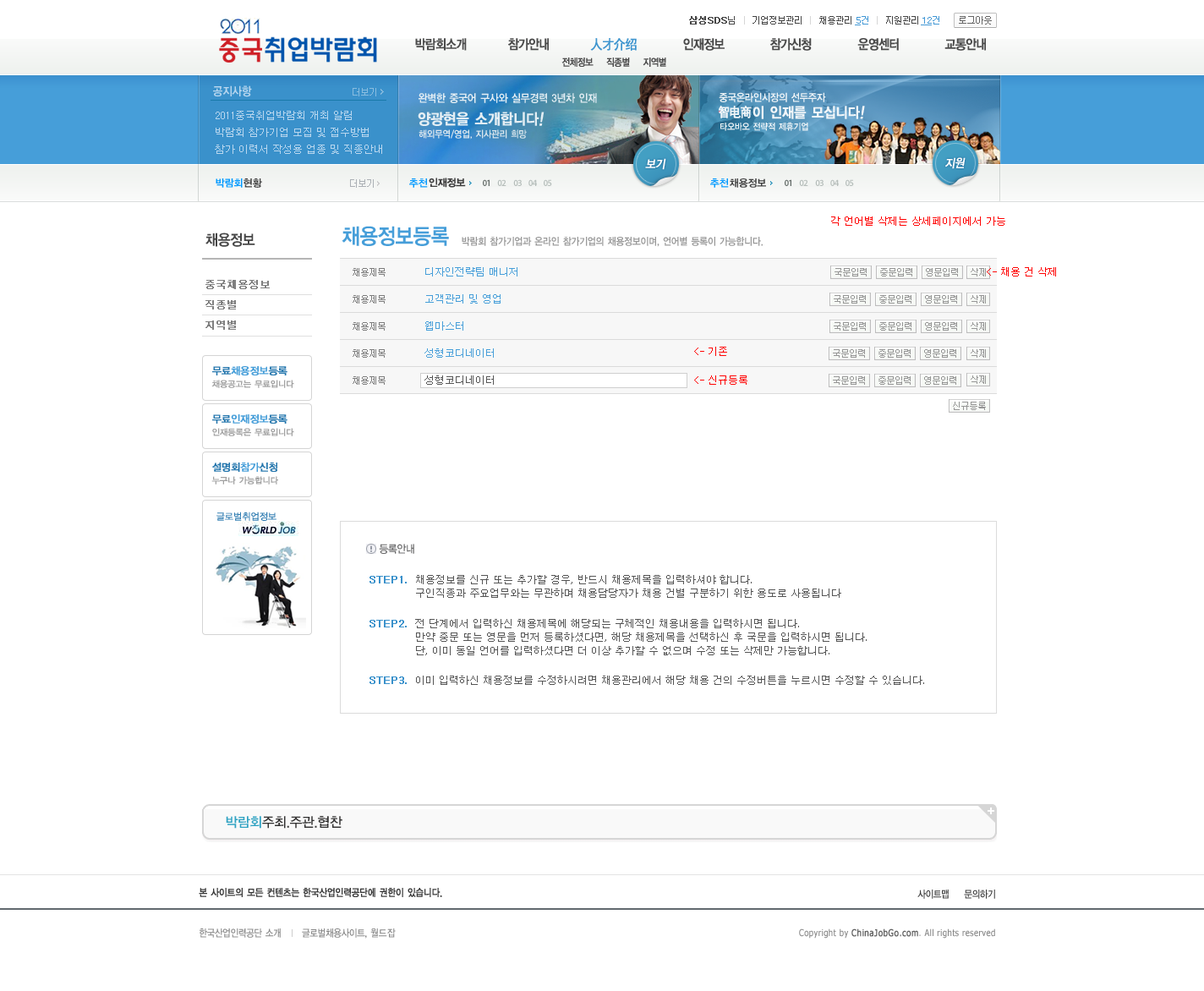
<style>
.page{position:relative;width:1204px;height:991px;background:#ffffff}
.page>*{position:absolute;margin:0}
.t1{font:9.3px "Dotum";letter-spacing:-0.1em;color:#464646}
.t2{font:9.3px "Dotum";letter-spacing:-0.1em;color:#464646;font-weight:bold}
.t3{font:9.3px "Dotum";letter-spacing:-0.1em;color:#d6d6d6}
.t4{font:9.3px "Dotum";letter-spacing:-0.1em;color:#666666}
.t5{font:9.3px "Dotum";color:#4298d5;text-decoration:underline}
.t6{font:9.3px "Dotum";color:#4298d5}
.t7{font:13.5px "YDIYGO130-KSCpc-EUC-H";letter-spacing:-0.14em;color:#4a4a4a;font-weight:bold;scale:0.86 1}
.t8{font:13.5px "SimHei";letter-spacing:-0.08em;color:#3e95cf;font-weight:bold;scale:0.9 1}
.t9{font:10.1px "YDIYGO130-KSCpc-EUC-H";letter-spacing:-0.14em;color:#4a4a4a;font-weight:bold;scale:0.86 1}
.t10{font:11.8px "YDIYGO140-KSCpc-EUC-H";letter-spacing:-0.1em;color:#b9d7ef;scale:0.9 1}
.t11{font:11.2px "YDIYGO140-KSCpc-EUC-H";letter-spacing:-0.1em;color:#e4eef4;scale:0.9 1}
.t12{font:10.5px "YDIYGO140-KSCpc-EUC-H";letter-spacing:-0.1em;color:#f0f5f8;scale:0.9 1}
.t13{font:10.1px/16.9px "Dotum";color:#b9d7ef}
.t14{font:15.3px "YDIYGO140-KSCpc-EUC-H";letter-spacing:-0.1em;color:#e4eef4;font-weight:bold;scale:0.9 1}
.t15{font:15.3px "YDIYGO140-KSCpc-EUC-H";letter-spacing:-0.1em;color:#e4eef4;font-weight:bold;font-style:italic;scale:0.9 1}
.t16{font:13.1px "SimHei";letter-spacing:-0.1em;color:#f0f5f8;font-weight:bold;scale:0.9 1}
.t17{font:14.5px "YDIYGO140-KSCpc-EUC-H";letter-spacing:-0.1em;color:#f0f5f8;font-weight:bold;scale:0.9 1}
.t18{font:14.5px "YDIYGO140-KSCpc-EUC-H";letter-spacing:-0.1em;color:#f0f5f8;font-weight:bold;font-style:italic;scale:0.9 1}
.t19{font:9.2px "YDIYGO140-KSCpc-EUC-H";letter-spacing:-0.1em;color:#f0f5f8;scale:0.9 1}
.t20{font:9.8px "YDIYGO140-KSCpc-EUC-H";letter-spacing:-0.1em;color:#dde8ef;scale:0.9 1}
.t21{font:11.8px "YDIYGO130-KSCpc-EUC-H";letter-spacing:-0.1em;color:#ffffff;font-weight:bold;font-style:italic;scale:0.9 1}
.t22{font:10.1px "YDIYGO140-KSCpc-EUC-H";letter-spacing:-0.1em;color:#0099ff}
.t23{font:10.1px "YDIYGO140-KSCpc-EUC-H";letter-spacing:-0.1em;color:#3e3e3e}
.t24{font:10.1px "Dotum";color:#ff0000}
.t25{font:15.2px "YDIYGO140-KSCpc-EUC-H";letter-spacing:-0.1em;color:#454545;scale:0.9 1}
.t26{font:22px "YDIYGO140-KSCpc-EUC-H";letter-spacing:-0.1em;color:#469ed9;scale:0.9 1}
.t27{font:10.1px "YDIYGO140-KSCpc-EUC-H";letter-spacing:-0.1em;color:#999999;scale:0.9 1}
.t28{font:9.3px "Dotum";letter-spacing:-0.1em;color:#7d7d7d}
.t29{font:10.1px "Dotum";color:#469ed9}
.t30{font:9.3px "Dotum";letter-spacing:-0.1em;color:#969696}
.t31{font:10.1px/20.3px "Dotum";color:#808080;font-weight:bold}
.t32{font:10.1px "YDIYGO130-KSCpc-EUC-H";letter-spacing:-0.1em;color:#469ed9;font-weight:bold}
.t33{font:10.1px "YDIYGO130-KSCpc-EUC-H";letter-spacing:-0.1em;color:#2476ad;font-weight:bold}
.t34{font:10.1px "Dotum";color:#555555}
.t35{font:8.5px "YDIYGO130-KSCpc-EUC-H";letter-spacing:-0.1em;color:#a1a1a1;font-weight:bold}
.t36{font:9.3px "YDIYGO120-KSCpc-EUC-H";letter-spacing:-0.1em;color:#2f7cb1;font-weight:bold}
.t37{font:11px "YDIYGO130-KSCpc-EUC-H";letter-spacing:-0.1em;color:#676768;scale:0.9 1}
.t38{font:10.1px "Dotum";color:#3a91cb;font-weight:bold}
.t39{font:10.1px/13.5px "Dotum";color:#555555}
.t40{font:13.5px "YDIYGO130-KSCpc-EUC-H";letter-spacing:-0.1em;color:#323131}
.t41{font:13.5px "YDIYGO130-KSCpc-EUC-H";letter-spacing:-0.1em;color:#2ea2c2}
.t42{font:10.1px "YDIYGO130-KSCpc-EUC-H";letter-spacing:-0.1em;color:#373737;font-weight:bold;scale:0.86 1}
.t43{font:10.1px "YDIYGO130-KSCpc-EUC-H";letter-spacing:-0.1em;color:#373737;scale:0.86 1}
.t44{font:10.1px "YDIYGO130-KSCpc-EUC-H";letter-spacing:-0.1em;color:#868686;scale:0.86 1}
.t45{font:10.1px "YDIYGO130-KSCpc-EUC-H";letter-spacing:-0.05em;color:#868686;scale:0.86 1}
.t46{font:9.3px "Tahoma";letter-spacing:0.05em;color:#868686;scale:0.86 1}
.t47{font:9.3px "Tahoma";letter-spacing:0.05em;color:#626262;font-weight:bold;scale:0.86 1}
</style>
<div class="page">
<p class="t1" style="left:689px;top:16px;width:303px;height:9px"><span class="t2">삼성SDS</span>님   <span class="t3">| </span>  기업정보관리   <span class="t3">| </span>  채용관리          <span class="t3">|</span>   지원관리                <span class="t4">로그아웃</span></p>
<p class="t5" style="left:855px;top:16px;width:13px;height:9px">5<span class="t6">건</span></p>
<p class="t5" style="left:921px;top:16px;width:18px;height:9px">12<span class="t6">건</span></p>
<p class="t7" style="left:415px;top:38px;width:52px;height:13px">박람회소개</p>
<p class="t7" style="left:508px;top:38px;width:41px;height:13px">참가안내</p>
<p class="t8" style="left:590px;top:38px;width:46px;height:13px">人才介绍</p>
<p class="t7" style="left:683px;top:38px;width:41px;height:13px">인재정보</p>
<p class="t7" style="left:770px;top:38px;width:41px;height:13px">참가신청</p>
<p class="t7" style="left:857px;top:38px;width:42px;height:13px">운영센터</p>
<p class="t7" style="left:944px;top:38px;width:42px;height:13px">교통안내</p>
<p class="t9" style="left:561px;top:57px;width:105px;height:10px">전체정보    직종별    지역별</p>
<p class="t10" style="left:213px;top:85px;width:39px;height:12px">공지사항</p>
<p class="t11" style="left:418px;top:93px;width:179px;height:10px">완벽한 중국어 구사와 실무경력 3년차 인재</p>
<p class="t12" style="left:718px;top:92px;width:108px;height:10px">중국온라인시장의 선두주자</p>
<p class="t13" style="left:215px;top:111px;width:167px;height:43px">2011중국취업박람회 개최 알림<br>박람회 참가기업 모집 및 접수방법<br>참가 이력서 작성용 업종 및 직종안내</p>
<p class="t14" style="left:418px;top:112px;width:126px;height:14px">양광현을 소개합니다<span class="t15">!</span></p>
<p class="t16" style="left:718px;top:106px;width:33px;height:12px">智电商</p>
<p class="t17" style="left:752px;top:106px;width:113px;height:13px">이 인재를 모십니다<span class="t18">!</span></p>
<p class="t19" style="left:720px;top:122px;width:88px;height:9px">타오바오 전략적 제휴기업</p>
<p class="t20" style="left:418px;top:129px;width:109px;height:10px">해외무역/영업, 지사관리 희망</p>
<p class="t21" style="left:645px;top:158px;width:21px;height:12px">보기</p>
<p class="t21" style="left:945px;top:157px;width:20px;height:12px">지원</p>
<p class="t22" style="left:216px;top:178px;width:27px;height:10px">박람회</p>
<p class="t23" style="left:243px;top:178px;width:19px;height:10px">현황</p>
<p class="t22" style="left:409px;top:178px;width:19px;height:10px">추천</p>
<p class="t23" style="left:429px;top:178px;width:37px;height:10px">인재정보</p>
<p class="t22" style="left:710px;top:178px;width:19px;height:10px">추천</p>
<p class="t23" style="left:729px;top:178px;width:37px;height:10px">채용정보</p>
<p class="t24" style="left:831px;top:216px;width:174px;height:10px">각 언어별 삭제는 상세페이지에서 가능</p>
<p class="t25" style="left:205px;top:232px;width:50px;height:15px">채용정보</p>
<p class="t26" style="left:341px;top:226px;width:108px;height:20px">채용정보등록</p>
<p class="t27" style="left:462px;top:237px;width:300px;height:10px">박람회 참가기업과 온라인 참가기업의 채용정보이며, 언어별 등록이 가능합니다.</p>
<p class="t28" style="left:352px;top:268px;width:33px;height:8px">채용제목</p>
<p class="t29" style="left:425px;top:267px;width:92px;height:9px">디자인전략팀 매니저</p>
<p class="t30" style="left:834px;top:268px;width:32px;height:8px">국문입력</p>
<p class="t30" style="left:880px;top:268px;width:32px;height:8px">중문입력</p>
<p class="t30" style="left:926px;top:268px;width:32px;height:8px">영문입력</p>
<p class="t24" style="left:986px;top:267px;width:70px;height:9px">&lt;- 채용 건 삭제</p>
<p class="t31" style="left:205px;top:280px;width:65px;height:50px">중국채용정보<br>직종별<br>지역별</p>
<p class="t28" style="left:352px;top:295px;width:33px;height:8px">채용제목</p>
<p class="t29" style="left:425px;top:294px;width:75px;height:9px">고객관리 및 영업</p>
<p class="t30" style="left:833px;top:295px;width:33px;height:8px">국문입력</p>
<p class="t30" style="left:879px;top:295px;width:32px;height:8px">중문입력</p>
<p class="t30" style="left:925px;top:295px;width:32px;height:8px">영문입력</p>
<p class="t28" style="left:352px;top:322px;width:33px;height:9px">채용제목</p>
<p class="t29" style="left:425px;top:321px;width:38px;height:10px">웹마스터</p>
<p class="t30" style="left:833px;top:322px;width:33px;height:9px">국문입력</p>
<p class="t30" style="left:879px;top:322px;width:32px;height:9px">중문입력</p>
<p class="t30" style="left:925px;top:322px;width:32px;height:9px">영문입력</p>
<p class="t28" style="left:352px;top:349px;width:33px;height:9px">채용제목</p>
<p class="t29" style="left:424px;top:348px;width:70px;height:10px">성형코디네이터</p>
<p class="t24" style="left:694px;top:347px;width:33px;height:9px">&lt;- 기존</p>
<p class="t30" style="left:833px;top:349px;width:32px;height:9px">국문입력</p>
<p class="t30" style="left:878px;top:349px;width:32px;height:9px">중문입력</p>
<p class="t30" style="left:924px;top:349px;width:32px;height:9px">영문입력</p>
<p class="t32" style="left:212px;top:366px;width:75px;height:9px"><span class="t33">무료</span>채용정보<span class="t33">등록</span></p>
<p class="t28" style="left:352px;top:376px;width:33px;height:9px">채용제목</p>
<p class="t34" style="left:424px;top:375px;width:70px;height:10px">성형코디네이터</p>
<p class="t24" style="left:694px;top:375px;width:53px;height:10px">&lt;- 신규등록</p>
<p class="t30" style="left:833px;top:376px;width:32px;height:9px">국문입력</p>
<p class="t30" style="left:878px;top:376px;width:32px;height:9px">중문입력</p>
<p class="t30" style="left:924px;top:376px;width:32px;height:9px">영문입력</p>
<p class="t35" style="left:211px;top:380px;width:83px;height:8px">채용공고는 무료입니다</p>
<p class="t30" style="left:953px;top:402px;width:33px;height:8px">신규등록</p>
<p class="t32" style="left:212px;top:414px;width:75px;height:9px"><span class="t33">무료</span>인재정보<span class="t33">등록</span></p>
<p class="t35" style="left:212px;top:428px;width:82px;height:8px">인재등록은 무료입니다</p>
<p class="t33" style="left:212px;top:462px;width:65px;height:10px">설명회<span class="t32">참가</span>신청</p>
<p class="t35" style="left:211px;top:476px;width:67px;height:8px">누구나 가능합니다</p>
<p class="t36" style="left:216px;top:511px;width:60px;height:10px">글로벌취업정보</p>
<p class="t37" style="left:379px;top:544px;width:35px;height:10px">등록안내</p>
<p class="t38" style="left:369px;top:576px;width:38px;height:7px">STEP1.</p>
<p class="t39" style="left:416px;top:575px;width:425px;height:23px">채용정보를 신규 또는 추가할 경우, 반드시 채용제목을 입력하셔야 합니다.<br>구인직종과 주요업무와는 무관하며 채용담당자가 채용 건별 구분하기 위한 용도로 사용됩니다</p>
<p class="t38" style="left:369px;top:620px;width:38px;height:7px">STEP2.</p>
<p class="t39" style="left:415px;top:619px;width:451px;height:36px">전 단계에서 입력하신 채용제목에 해당되는 구체적인 채용내용을 입력하시면 됩니다.<br>만약 중문 또는 영문을 먼저 등록하셨다면, 해당 채용제목을 선택하신 후 국문을 입력하시면 됩니다.<br>단, 이미 동일 언어를 입력하셨다면 더 이상 추가할 수 없으며 수정 또는 삭제만 가능합니다.</p>
<p class="t38" style="left:369px;top:676px;width:38px;height:8px">STEP3.</p>
<p class="t34" style="left:416px;top:675px;width:508px;height:10px">이미 입력하신 채용정보를 수정하시려면 채용관리에서 해당 채용 건의 수정버튼을 누르시면 수정할 수 있습니다.</p>
<p class="t40" style="left:226px;top:816px;width:116px;height:12px"><span class="t41">박람회</span>주최.주관.협찬</p>
<p class="t42" style="left:199px;top:888px;width:243px;height:9px">본 사이트의 모든 컨텐츠는 한국산업인력공단에 권한이 있습니다.</p>
<p class="t43" style="left:917px;top:889px;width:31px;height:10px">사이트맵</p>
<p class="t43" style="left:964px;top:889px;width:31px;height:10px">문의하기</p>
<p class="t44" style="left:199px;top:928px;width:197px;height:10px">한국산업인력공단 소개      글로벌채용사이트, <span class="t45">월드잡</span></p>
<p class="t46" style="left:799px;top:928px;width:196px;height:10px">Copyright by <span class="t47">ChinaJobGo.com</span>. All rights reserved</p>
</div>
